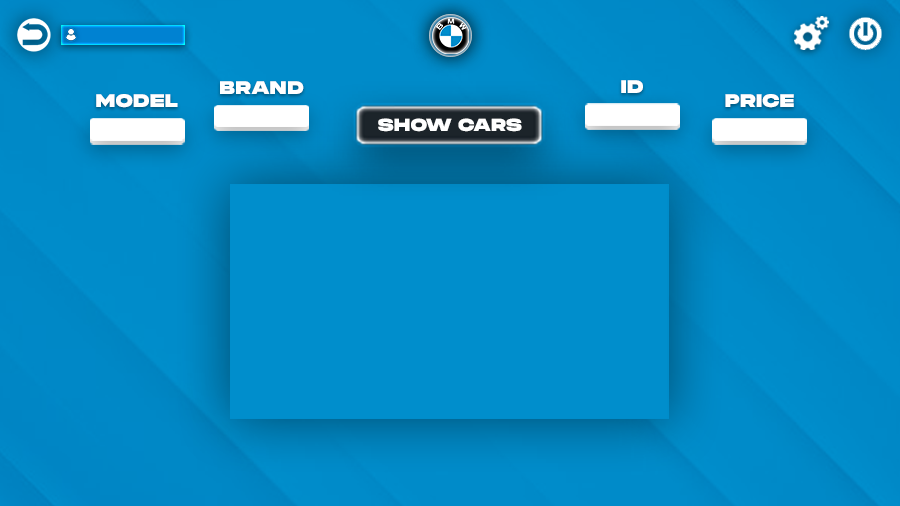
<style>
.page{position:relative;width:900px;height:506px;background:#008ecc}
.page>*{position:absolute;margin:0}
.t1{font:18.3px "Phonk-RegularDEMO";color:#ffffff}
.t2{font:17.6px "Phonk-RegularDEMO";color:#ffffff}
</style>
<div class="page">
<p class="t1" style="left:220px;top:81px;width:84px;height:13px">BRAND</p>
<p class="t1" style="left:621px;top:80px;width:22px;height:13px">ID</p>
<p class="t1" style="left:96px;top:94px;width:82px;height:14px">MODEL</p>
<p class="t1" style="left:725px;top:94px;width:69px;height:14px">PRICE</p>
<p class="t2" style="left:378px;top:118px;width:144px;height:14px">SHOW CARS</p>
</div>
